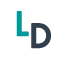
<style>
.page{position:relative;width:64px;height:64px;background:#ffffff}
.page>*{position:absolute;margin:0}
.t1{font:36px "FuturaPT-Medium";letter-spacing:0.5em;color:#009999;font-weight:bold}
.t2{font:36px "FuturaPT-Medium";letter-spacing:0.5em;color:#323f4c;font-weight:bold}
</style>
<div class="page">
<p class="t1" style="left:16px;top:11px;width:13px;height:26px">L</p>
<p class="t2" style="left:31px;top:23px;width:20px;height:26px">D</p>
</div>
